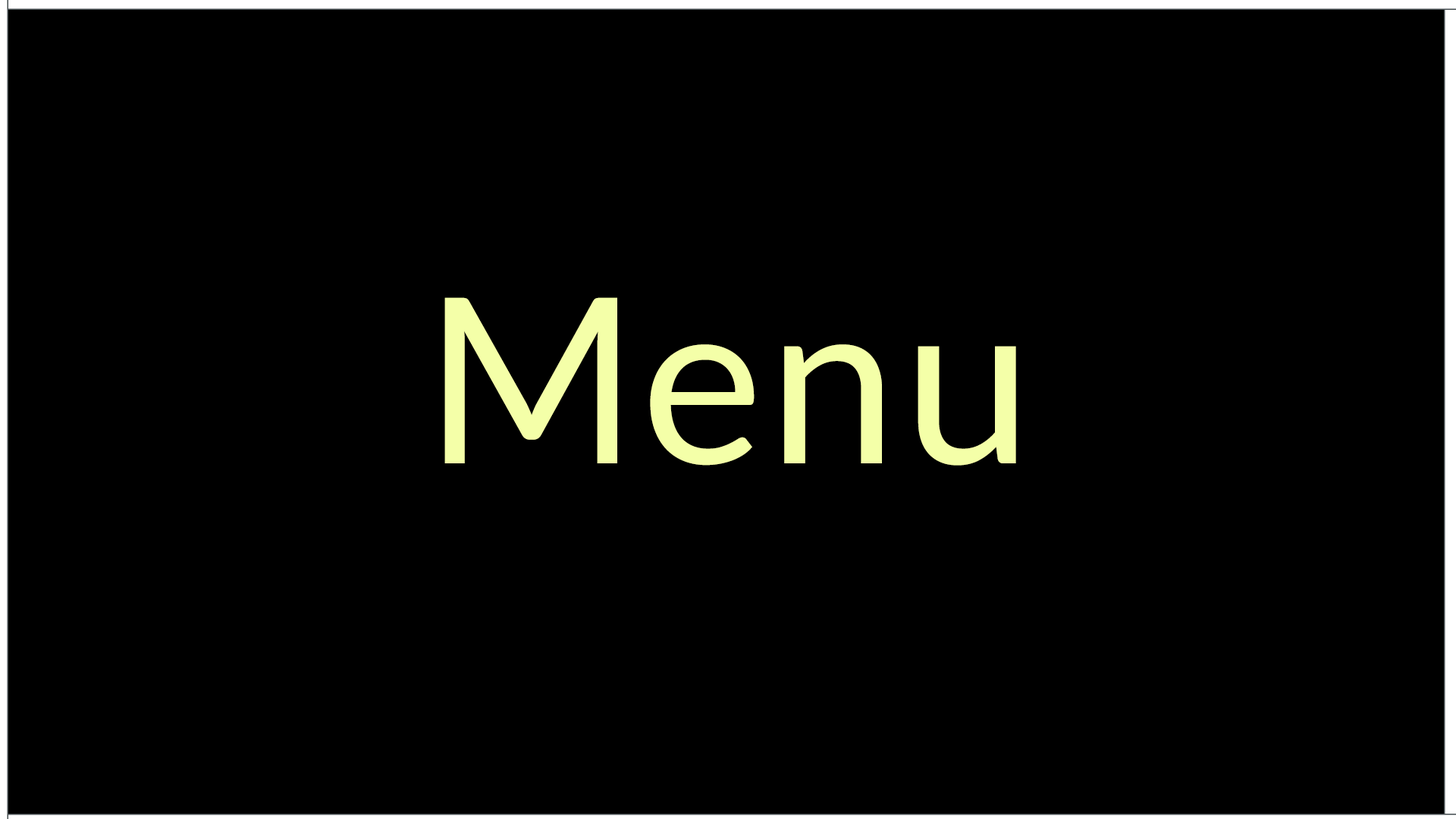
<style>
.page{position:relative;width:1456px;height:819px;background:#000000}
.page>*{position:absolute;margin:0}
.t1{font:230.9px "Lato-Regular";letter-spacing:0.025em;color:#f4ffa8}
</style>
<div class="page">
<p class="t1" style="left:444px;top:297px;width:572px;height:169px">Menu</p>
</div>
